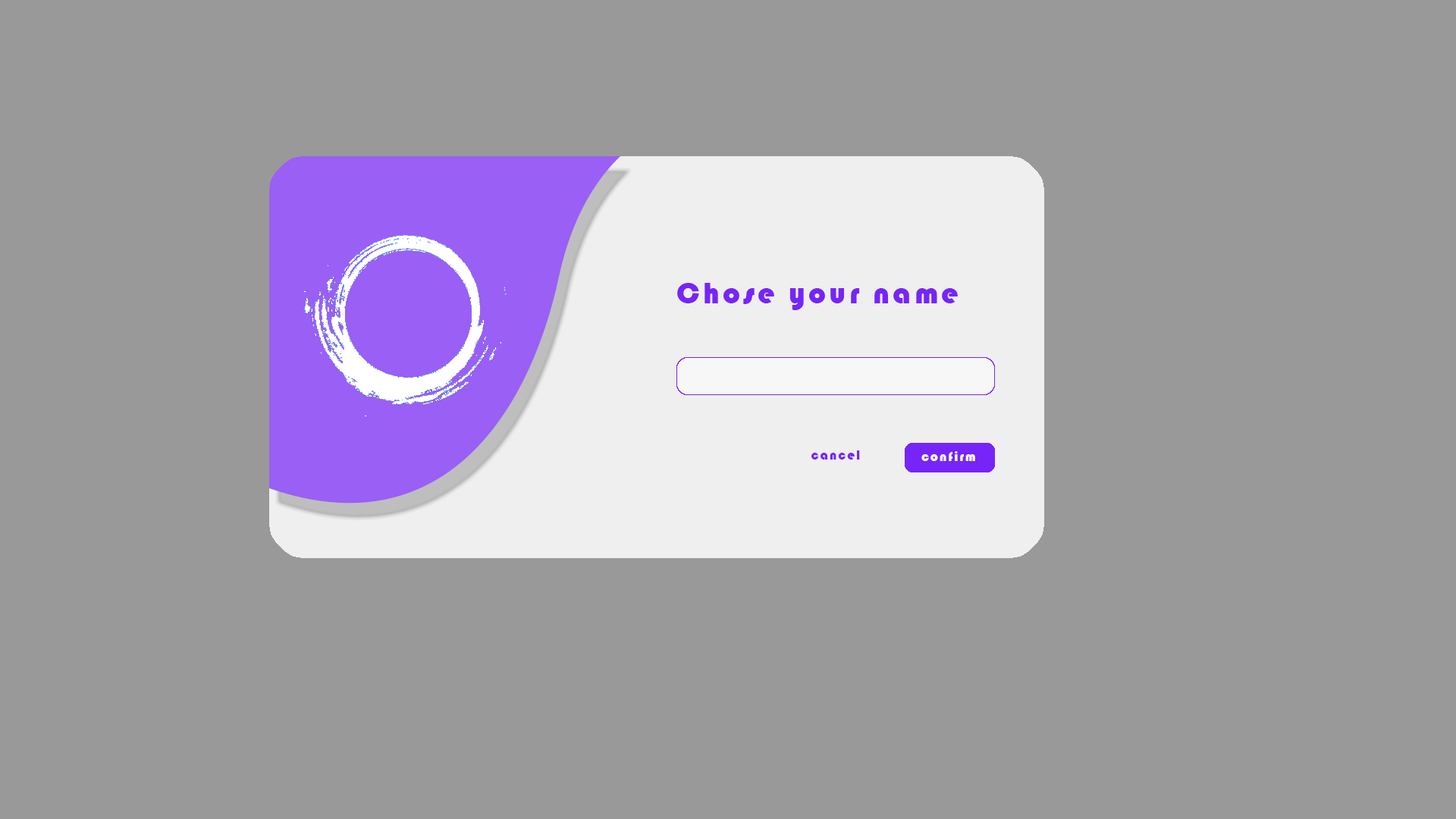
<style>
.page{position:relative;width:1456px;height:819px;background:#999999}
.page>*{position:absolute;margin:0}
.t1{font:31.1px "Bauhaus93";letter-spacing:0.1em;color:#7724f8}
.t2{font:13.6px "Bauhaus93";letter-spacing:0.1em;color:#7724f8}
</style>
<div class="page">
<p class="t1" style="left:677px;top:283px;width:281px;height:27px">Chose your name</p>
<p class="t2" style="left:811px;top:450px;width:49px;height:10px">cancel</p>
</div>
